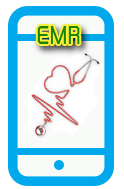
<style>
.page{position:relative;width:124px;height:189px;background:#f9fbf9}
.page>*{position:absolute;margin:0}
.t1{font:41.8px "THChakraPetch-Bold";color:#198504;scale:0.87 1}
</style>
<div class="page">
<p class="t1" style="left:37px;top:26px;width:43px;height:18px">EMR</p>
</div>
